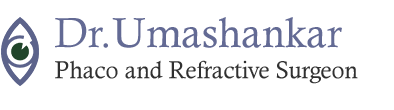
<style>
.page{position:relative;width:394px;height:110px;background:#ffffff}
.page>*{position:absolute;margin:0}
.t1{font:42px "CalistoMT";color:#636a94}
.t2{font:24px "CalistoMT";color:#303030}
</style>
<div class="page">
<p class="t1" style="left:55px;top:17px;width:287px;height:31px">Dr.Umashankar</p>
<p class="t2" style="left:55px;top:60px;width:303px;height:24px">Phaco and Refractive Surgeon</p>
</div>
